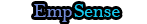
<style>
.page{position:relative;width:147px;height:24px;background:#ffffff}
.page>*{position:absolute;margin:0}
.t1{font:20px "BellMT";color:#738cd6}
.t2{font:20px "BellMT";color:#15caf1}
</style>
<div class="page">
<p class="t1" style="left:34px;top:4px;width:38px;height:18px">Emp</p>
<p class="t2" style="left:74px;top:4px;width:46px;height:13px">Sense</p>
</div>
